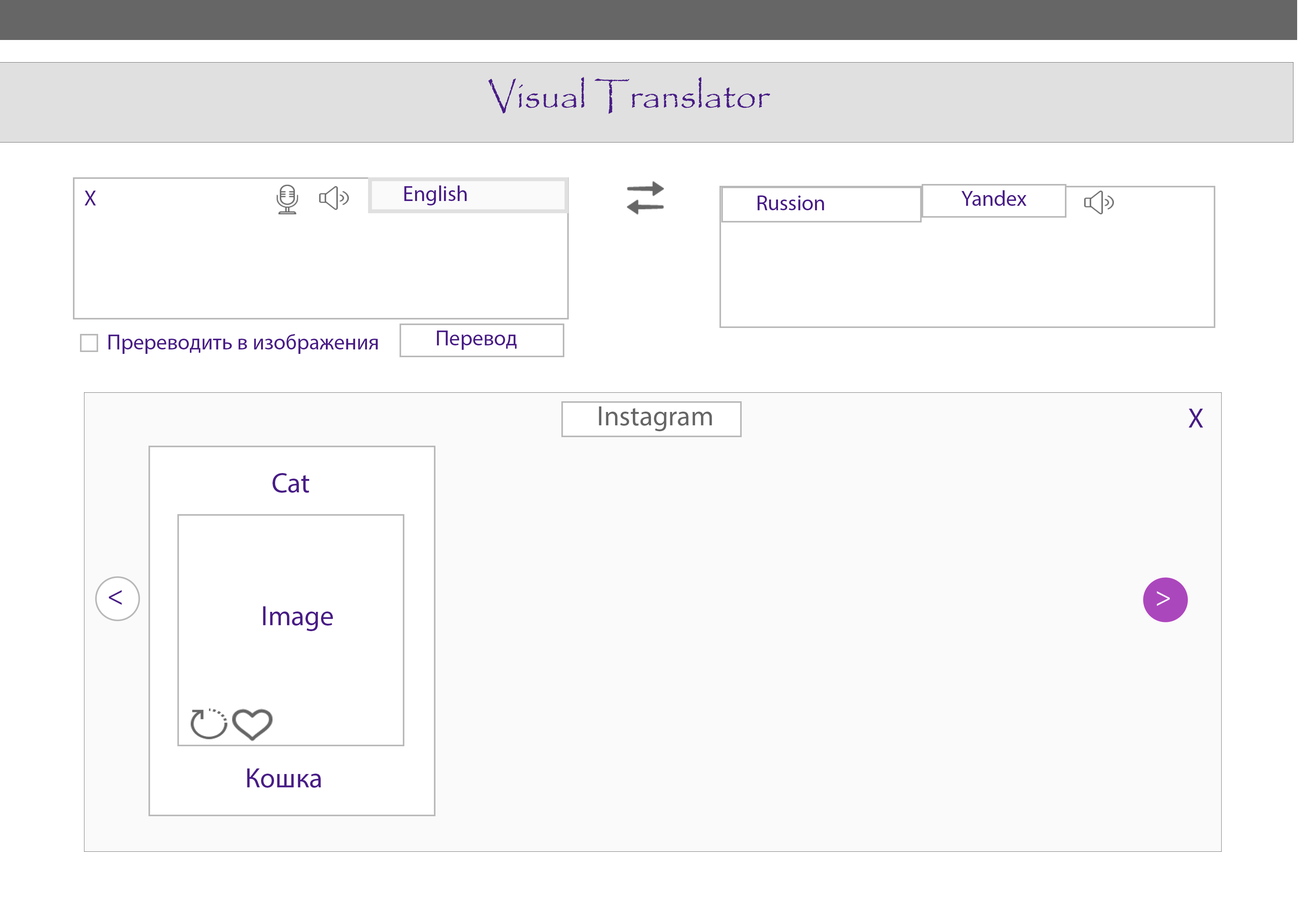
<style>
.page{position:relative;width:1299px;height:918px;background:#ffffff}
.page>*{position:absolute;margin:0}
.t1{font:37px "Papyrus-Regular";color:#491c87}
.t2{font:21.6px "MyriadPro-Regular";color:#491c87}
.t3{font:27.8px "MyriadPro-Regular";color:#666666}
.t4{font:27.8px "MyriadPro-Regular";color:#491c87}
.t5{font:27.8px "MyriadPro-Regular";color:#f6f2fb}
</style>
<div class="page">
<p class="t1" style="left:488px;top:77px;width:282px;height:37px">Visual Translator</p>
<p class="t2" style="left:404px;top:185px;width:63px;height:20px">English</p>
<p class="t2" style="left:84px;top:191px;width:12px;height:14px">X</p>
<p class="t2" style="left:757px;top:195px;width:67px;height:15px">Russion</p>
<p class="t2" style="left:961px;top:190px;width:65px;height:16px">Yandex</p>
<p class="t2" style="left:108px;top:334px;width:270px;height:20px">Пререводить в изображения</p>
<p class="t2" style="left:437px;top:331px;width:80px;height:19px">Перевод</p>
<p class="t3" style="left:599px;top:407px;width:113px;height:24px">Instagram</p>
<p class="t4" style="left:1188px;top:409px;width:15px;height:19px">Х</p>
<p class="t4" style="left:272px;top:473px;width:37px;height:20px">Cat</p>
<p class="t4" style="left:109px;top:590px;width:13px;height:15px">&lt;</p>
<p class="t5" style="left:1157px;top:591px;width:13px;height:15px">&gt;</p>
<p class="t4" style="left:263px;top:606px;width:70px;height:25px">Image</p>
<p class="t4" style="left:247px;top:769px;width:74px;height:19px">Кошка</p>
</div>
